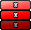
<style>
.page{position:relative;width:31px;height:30px}
.page>*{position:absolute;margin:0}
.t1{font:7.1px "ArialMT";color:#f0f0f0}
</style>
<div class="page">
<p class="t1" style="left:14px;top:3px;width:4px;height:4px">x</p>
<p class="t1" style="left:14px;top:13px;width:4px;height:4px">x</p>
</div>
